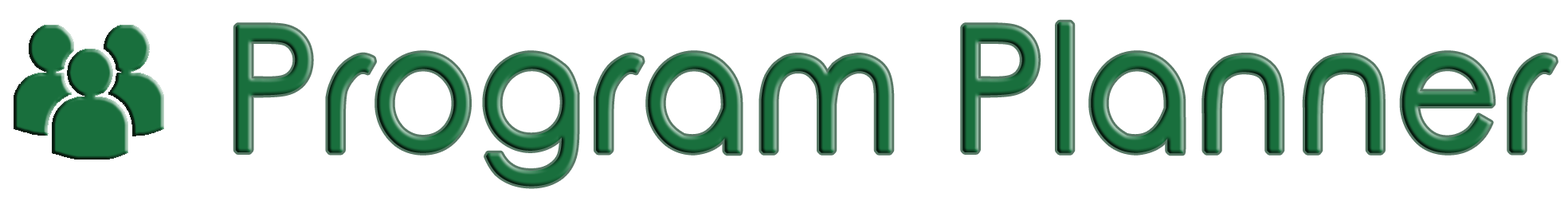
<style>
.page{position:relative;width:1568px;height:205px;background:#ffffff}
.page>*{position:absolute;margin:0}
.t1{font:169.3px "RoundedElegance-Regular";color:#196f3d;font-weight:bold;scale:0.93 1}
</style>
<div class="page">
<p class="t1" style="left:235px;top:22px;width:1321px;height:164px">Program Planner</p>
</div>
